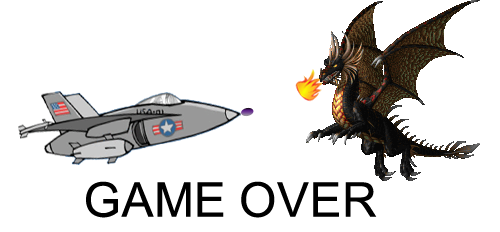
<style>
.page{position:relative;width:500px;height:232px;background:#ffffff}
.page>*{position:absolute;margin:0}
.t1{font:47.9px "ArialMT";color:#000000}
</style>
<div class="page">
<p class="t1" style="left:86px;top:181px;width:291px;height:37px">GAME OVER</p>
</div>
